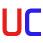
<style>
.page{position:relative;width:43px;height:43px;background:#ffffff}
.page>*{position:absolute;margin:0}
.t1{font:40px "AeroMaticsRegular";color:#e81e1e;text-transform:uppercase}
.t2{font:40px "AeroMaticsRegular";color:#2c1ee8;text-transform:uppercase}
</style>
<div class="page">
<p class="t1" style="left:2px;top:8px;width:20px;height:28px">U</p>
<p class="t2" style="left:25px;top:8px;width:16px;height:28px">C</p>
</div>
